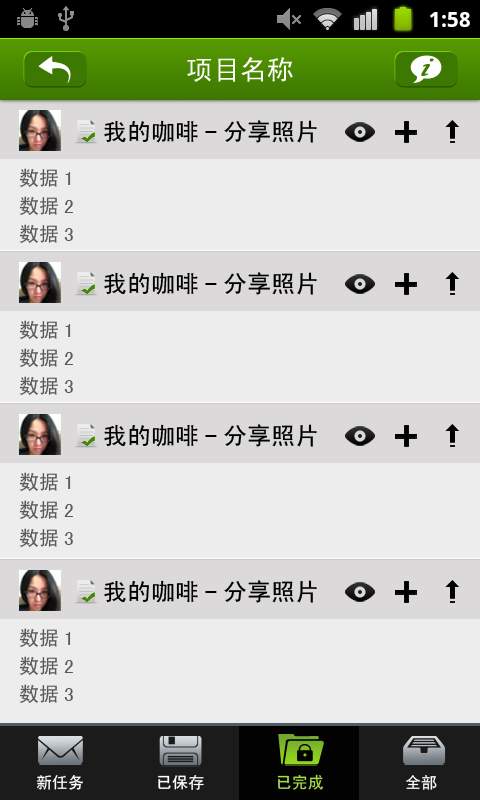
<style>
.page{position:relative;width:480px;height:800px;background:#eeeded}
.page>*{position:absolute;margin:0}
.t1{font:27px "SimHei";color:#ffffff}
.t2{font:30.1px "MonotypeCorsiva";color:#3d7902;font-weight:bold}
.t3{font:24px "SimHei";color:#000000}
.t4{font:20px/28px "SimHei";color:#5c5959}
.t5{font:16px "SimHei";color:#a5de44}
.t6{font:16px "SimHei";color:#fffffe}
.t7{font:16px "SimHei";color:#ffffff}
</style>
<div class="page">
<p class="t1" style="left:187px;top:57px;width:106px;height:25px">项目名称</p>
<p class="t2" style="left:421px;top:58px;width:13px;height:18px;rotate:16deg">i</p>
<p class="t3" style="left:104px;top:120px;width:213px;height:23px">我的咖啡-分享照片</p>
<p class="t4" style="left:19px;top:168px;width:54px;height:75px">数据1<br>数据2<br>数据3</p>
<p class="t3" style="left:104px;top:272px;width:213px;height:23px">我的咖啡-分享照片</p>
<p class="t4" style="left:19px;top:320px;width:54px;height:75px">数据1<br>数据2<br>数据3</p>
<p class="t3" style="left:104px;top:424px;width:213px;height:23px">我的咖啡-分享照片</p>
<p class="t4" style="left:19px;top:472px;width:54px;height:75px">数据1<br>数据2<br>数据3</p>
<p class="t3" style="left:104px;top:580px;width:213px;height:23px">我的咖啡-分享照片</p>
<p class="t4" style="left:19px;top:628px;width:54px;height:75px">数据1<br>数据2<br>数据3</p>
<p class="t5" style="left:277px;top:774px;width:46px;height:16px">已完成</p>
<p class="t6" style="left:36px;top:775px;width:47px;height:15px">新任务</p>
<p class="t7" style="left:158px;top:775px;width:46px;height:15px">已保存</p>
<p class="t7" style="left:406px;top:775px;width:31px;height:15px">全部</p>
</div>
